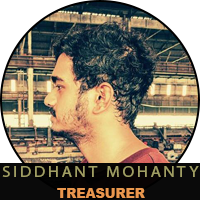
<style>
.page{position:relative;width:200px;height:200px}
.page>*{position:absolute;margin:0}
.t1{font:16.1px "MyriadPro-Regular";letter-spacing:0.16em;color:#a19f64;scale:1.06 1}
.t2{font:12.8px "Arial-Black";color:#e9974e}
</style>
<div class="page">
<p class="t1" style="left:2px;top:166px;width:197px;height:11px">SIDDHANT MOHANTY</p>
<p class="t2" style="left:57px;top:188px;width:88px;height:10px">TREASURER</p>
</div>
